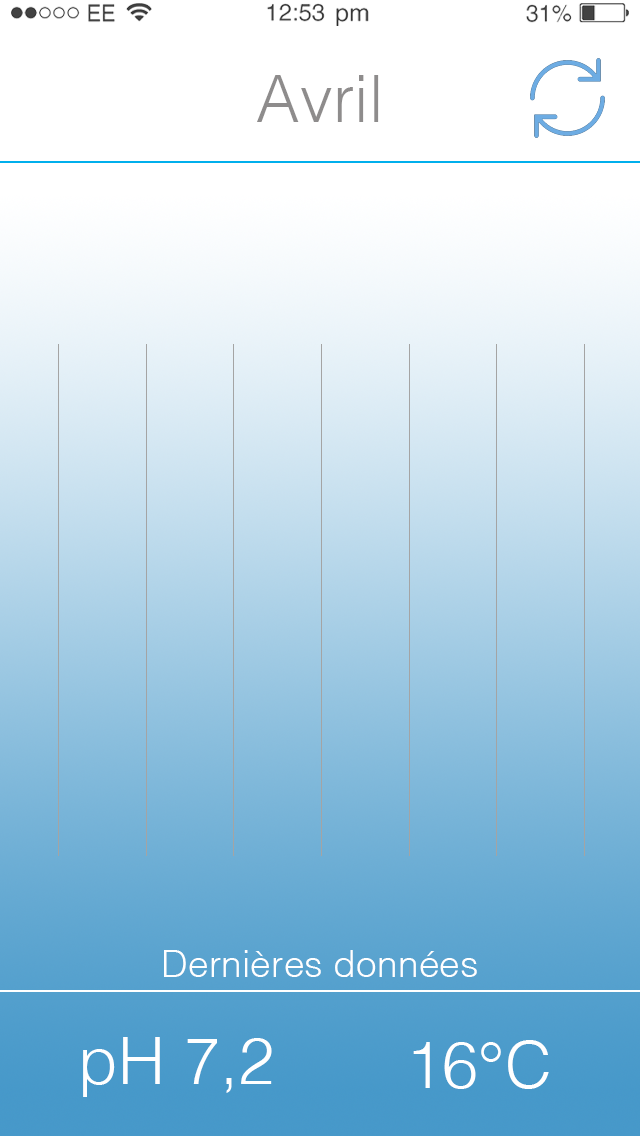
<style>
.page{position:relative;width:640px;height:1136px}
.page>*{position:absolute;margin:0}
.t1{font:65.3px "Helvetica-Light";color:#8e8c8c}
.t2{font:37.3px "Helvetica-Light";color:#ffffff}
.t3{font:65.3px "Helvetica-Light";color:#ffffff}
</style>
<div class="page">
<p class="t1" style="left:257px;top:75px;width:122px;height:47px">Avril</p>
<p class="t2" style="left:164px;top:950px;width:313px;height:27px">Dernières données</p>
<p class="t3" style="left:83px;top:1037px;width:189px;height:60px">pH 7,2</p>
<p class="t3" style="left:413px;top:1040px;width:136px;height:49px">16°C</p>
</div>
